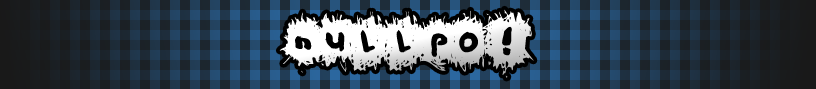
<style>
.page{position:relative;width:816px;height:89px}
.page>*{position:absolute;margin:0}
.t1{font:80px "TPFKrikkelKrakkel";color:#ffffff;scale:1.05 1}
</style>
<div class="page">
<p class="t1" style="left:279px;top:9px;width:255px;height:69px">nullpo!</p>
</div>
